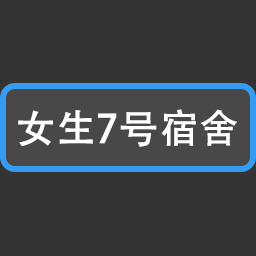
<style>
.page{position:relative;width:256px;height:256px;background:#333333}
.page>*{position:absolute;margin:0}
.t1{font:39px "AdobeHeitiStd-Regular";color:#ffffff;font-weight:bold}
</style>
<div class="page">
<p class="t1" style="left:18px;top:109px;width:219px;height:38px">女生7号宿舍</p>
</div>
